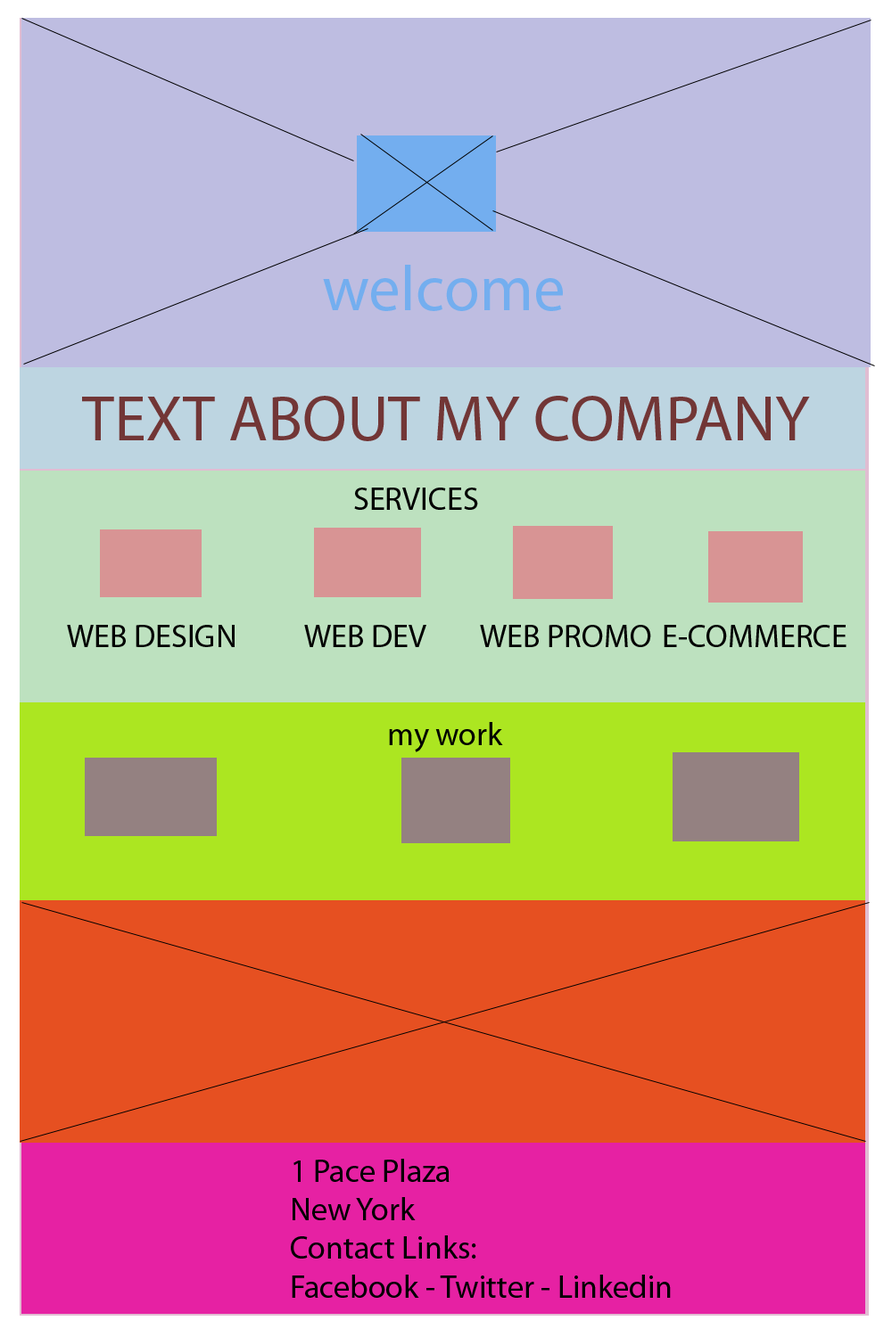
<style>
.page{position:relative;width:892px;height:1337px;background:#bebde1}
.page>*{position:absolute;margin:0}
.t1{font:64.2px "MyriadPro-Regular";color:#73aeef}
.t2{font:64.2px "MyriadPro-Regular";color:#723636}
.t3{font:32.1px "MyriadPro-Regular";color:#000000}
</style>
<div class="page">
<p class="t1" style="left:323px;top:265px;width:240px;height:46px">welcome</p>
<p class="t2" style="left:82px;top:396px;width:728px;height:45px">TEXT ABOUT MY COMPANY</p>
<p class="t3" style="left:354px;top:488px;width:124px;height:22px">SERVICES</p>
<p class="t3" style="left:67px;top:625px;width:167px;height:22px">WEB DESIGN</p>
<p class="t3" style="left:304px;top:625px;width:122px;height:22px">WEB DEV</p>
<p class="t3" style="left:480px;top:625px;width:171px;height:22px">WEB PROMO</p>
<p class="t3" style="left:663px;top:625px;width:183px;height:22px">E-COMMERCE</p>
<p class="t3" style="left:389px;top:722px;width:114px;height:31px">my work</p>
<p class="t3" style="left:291px;top:1159px;width:379px;height:139px">1 Pace Plaza<br>New York<br>Contact Links:<br>Facebook - Twitter - Linkedin</p>
</div>
